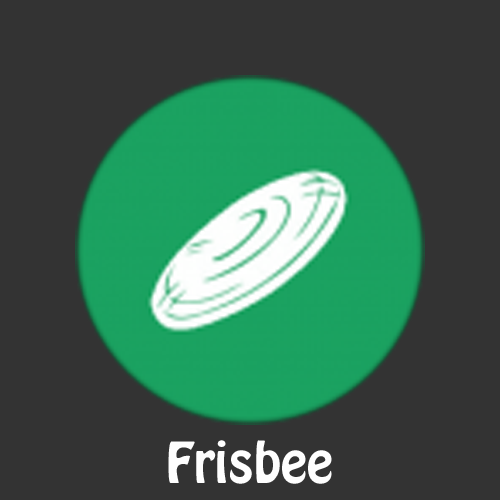
<style>
.page{position:relative;width:500px;height:500px;background:#333333}
.page>*{position:absolute;margin:0}
.t1{font:50px "HoboStd";color:#fefefe}
</style>
<div class="page">
<p class="t1" style="left:168px;top:440px;width:164px;height:44px">Frisbee</p>
</div>
